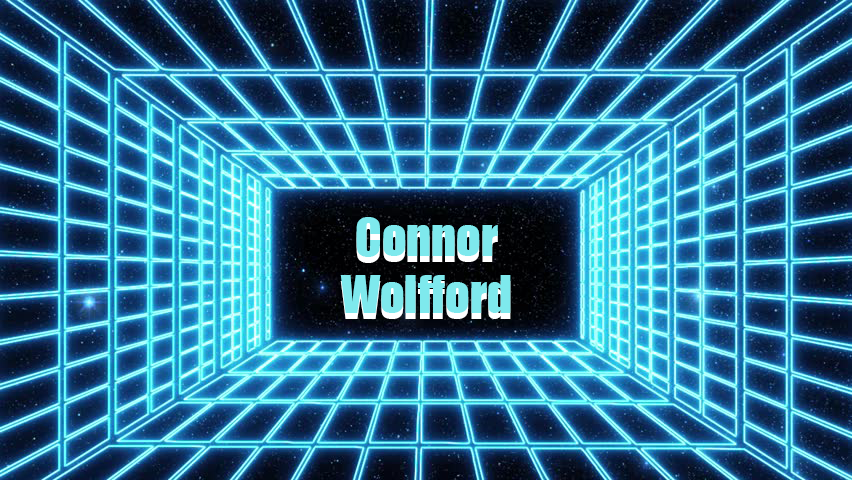
<style>
.page{position:relative;width:852px;height:480px}
.page>*{position:absolute;margin:0}
.t1{font:48px "Impact";color:#7ee9ed}
</style>
<div class="page">
<p class="t1" style="left:340px;top:217px;width:171px;height:96px;text-align:center">Connor<br>Wolfford</p>
<p class="t1" style="left:340px;top:223px;width:171px;height:96px;text-align:center">Connor<br>Wolfford</p>
</div>
